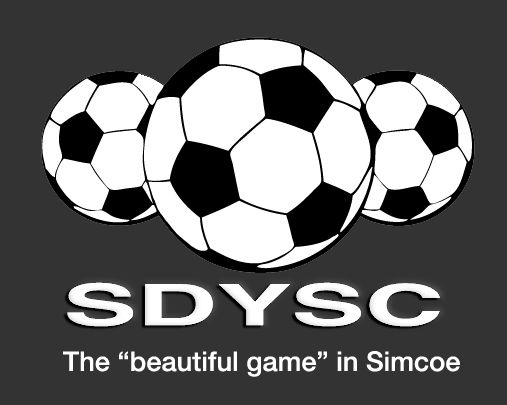
<style>
.page{position:relative;width:507px;height:405px;background:#333333}
.page>*{position:absolute;margin:0}
.t1{font:27.3px "HelveticaNeue-Medium";color:#ffffff}
</style>
<div class="page">
<p class="t1" style="left:63px;top:351px;width:397px;height:26px">The “beautiful game” in Simcoe</p>
</div>
